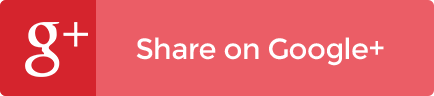
<style>
.page{position:relative;width:434px;height:96px;background:#eb5d66}
.page>*{position:absolute;margin:0}
.t1{font:29px "Montserrat-Regular";letter-spacing:-0.02em;color:#ffffff}
</style>
<div class="page">
<p class="t1" style="left:136px;top:37px;width:248px;height:29px">Share on Google+</p>
</div>
